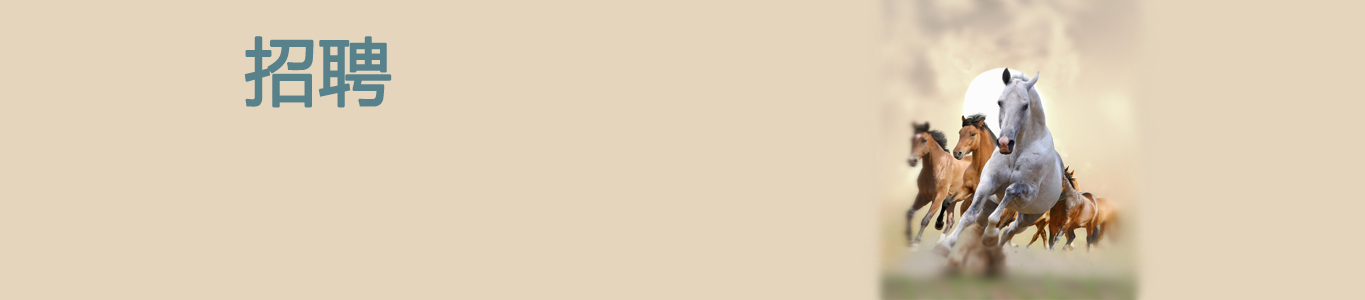
<style>
.page{position:relative;width:1365px;height:300px;background:#e4d5bc}
.page>*{position:absolute;margin:0}
.t1{font:72px "MicrosoftYaHei";color:#57818b;font-weight:bold}
</style>
<div class="page">
<p class="t1" style="left:244px;top:36px;width:148px;height:72px">招聘</p>
</div>
